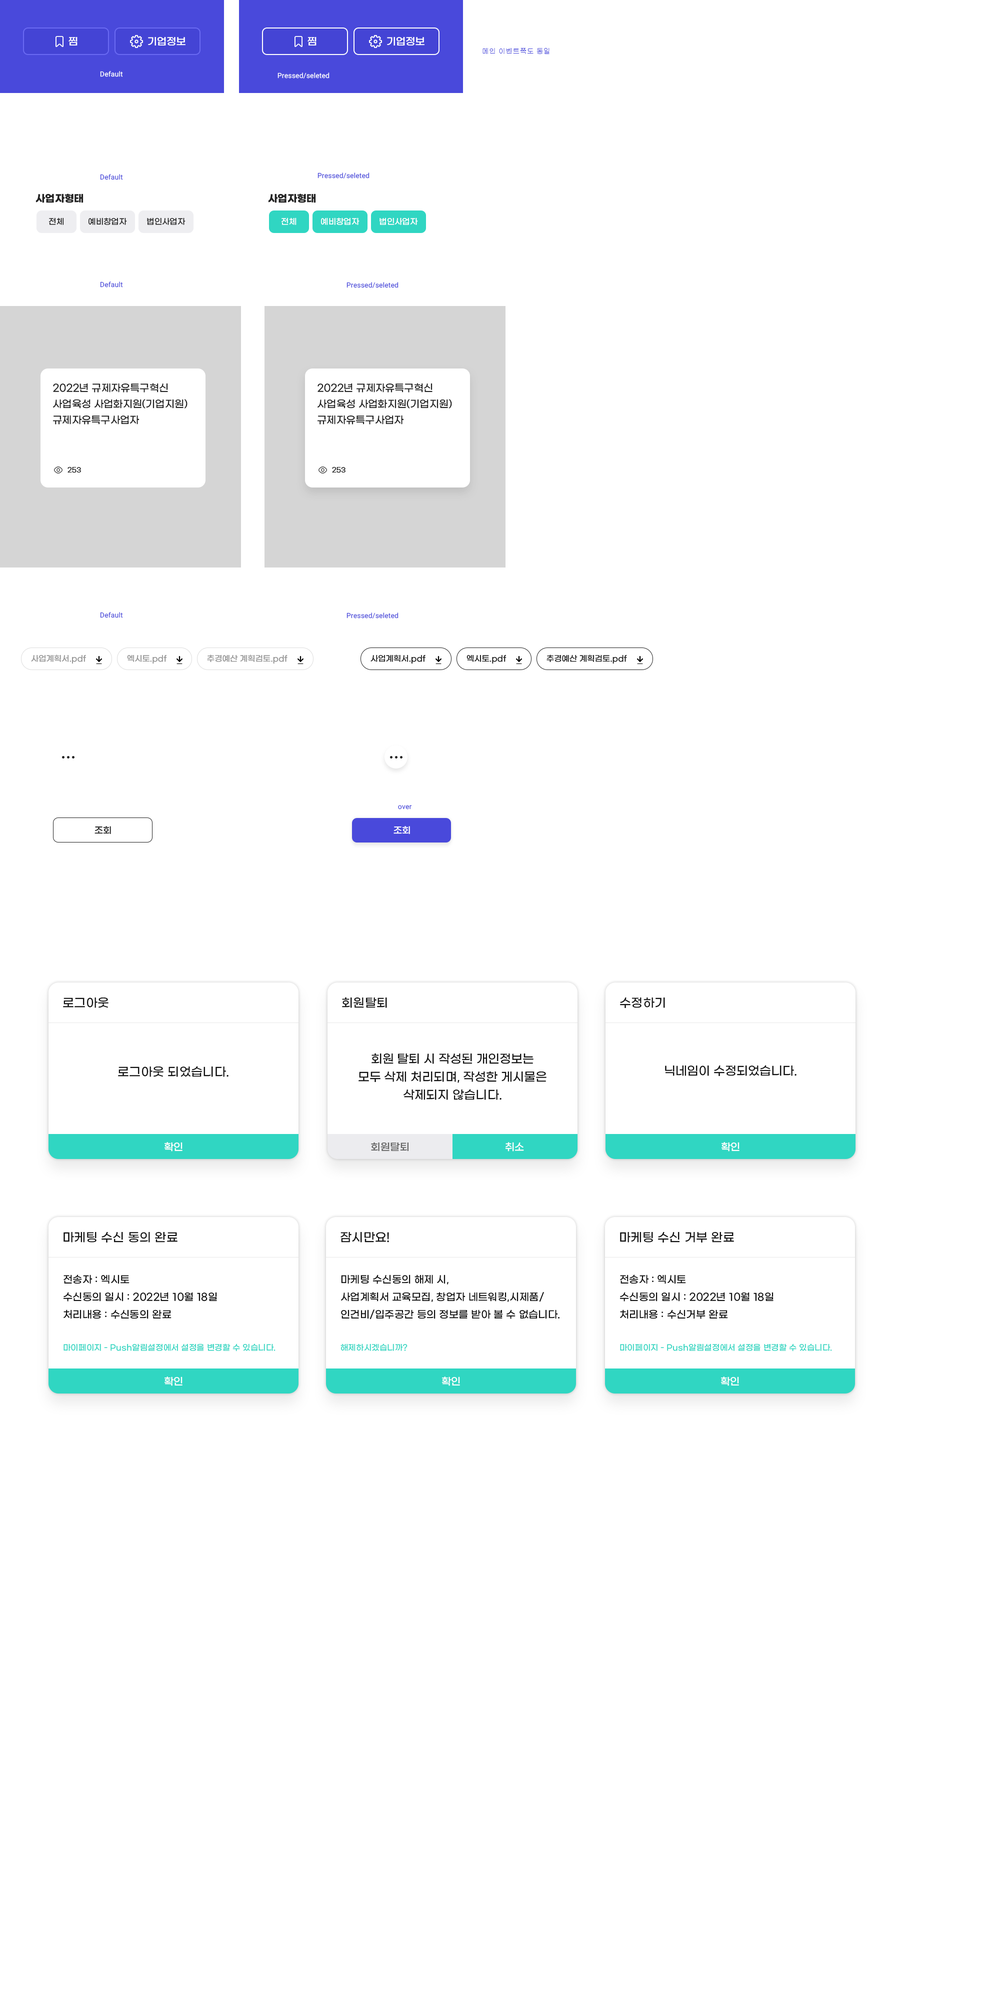
<style>
.page{position:relative;width:1000px;height:2000px;background:#ffffff}
.page>*{position:absolute;margin:0}
.t1{font:10px "GmarketSansMedium";color:#ffffff}
.t2{font:7px "Gulim";letter-spacing:0.01em;color:#4949db}
.t3{font:7px "Heebo-Regular";letter-spacing:0.01em;color:#ffffff}
.t4{font:7px "Heebo-Regular";letter-spacing:0.01em;color:#4949db}
.t5{font:10px "GmarketSansBold";color:#222222}
.t6{font:8px "GmarketSansMedium";color:#222222}
.t7{font:8px "GmarketSansMedium";color:#ffffff}
.t8{font:10px/16px "GmarketSansMedium";color:#222222}
.t9{font:7px "GmarketSansMedium";color:#222222}
.t10{font:8px "GmarketSansMedium";color:#999999}
.t11{font:9px "GmarketSansMedium";color:#222222}
.t12{font:9px "GmarketSansMedium";color:#ffffff}
.t13{font:12px "GmarketSansMedium";letter-spacing:0.01em;color:#101010}
.t14{font:12px/18px "GmarketSansMedium";color:#101010}
.t15{font:12px "GmarketSansMedium";color:#101010}
.t16{font:10px "GmarketSansMedium";letter-spacing:0.01em;color:#ffffff}
.t17{font:10px "GmarketSansMedium";letter-spacing:0.01em;color:#666666}
.t18{font:10px "GmarketSansMedium";letter-spacing:0.01em;color:#101010}
.t19{font:8px "GmarketSansMedium";letter-spacing:0.01em;color:#30d6c2}
</style>
<div class="page">
<p class="t1" style="left:68px;top:37px;width:10px;height:9px">찜</p>
<p class="t1" style="left:148px;top:37px;width:38px;height:9px">기업정보</p>
<p class="t1" style="left:308px;top:37px;width:8px;height:9px">찜</p>
<p class="t1" style="left:387px;top:37px;width:37px;height:9px">기업정보</p>
<p class="t2" style="left:482px;top:48px;width:68px;height:6px">메인 이벤트쪽도 동일</p>
<p class="t3" style="left:100px;top:71px;width:23px;height:6px">Default</p>
<p class="t3" style="left:278px;top:72px;width:52px;height:6px">Pressed/seleted</p>
<p class="t4" style="left:100px;top:174px;width:23px;height:6px">Default</p>
<p class="t4" style="left:318px;top:172px;width:52px;height:6px">Pressed/seleted</p>
<p class="t5" style="left:36px;top:194px;width:48px;height:9px">사업자형태</p>
<p class="t5" style="left:268px;top:194px;width:48px;height:9px">사업자형태</p>
<p class="t6" style="left:49px;top:218px;width:15px;height:7px">전체</p>
<p class="t6" style="left:88px;top:218px;width:39px;height:7px">예비창업자</p>
<p class="t6" style="left:147px;top:218px;width:39px;height:7px">법인사업자</p>
<p class="t7" style="left:282px;top:218px;width:14px;height:7px">전체</p>
<p class="t7" style="left:320px;top:218px;width:40px;height:7px">예비창업자</p>
<p class="t7" style="left:380px;top:218px;width:38px;height:7px">법인사업자</p>
<p class="t4" style="left:100px;top:282px;width:23px;height:6px">Default</p>
<p class="t4" style="left:346px;top:282px;width:52px;height:6px">Pressed/seleted</p>
<p class="t8" style="left:53px;top:383px;width:135px;height:41px">2022년 규제자유특구혁신 <br>사업육성 사업화지원(기업지원)<br>규제자유특구사업자</p>
<p class="t8" style="left:318px;top:383px;width:134px;height:41px">2022년 규제자유특구혁신 <br>사업육성 사업화지원(기업지원)<br>규제자유특구사업자</p>
<p class="t9" style="left:68px;top:466px;width:13px;height:7px">253</p>
<p class="t9" style="left:332px;top:466px;width:14px;height:7px">253</p>
<p class="t4" style="left:100px;top:612px;width:23px;height:6px">Default</p>
<p class="t4" style="left:346px;top:612px;width:52px;height:6px">Pressed/seleted</p>
<p class="t10" style="left:31px;top:654px;width:55px;height:10px">사업계획서.pdf</p>
<p class="t10" style="left:127px;top:655px;width:40px;height:9px">엑시토.pdf</p>
<p class="t10" style="left:207px;top:654px;width:81px;height:10px">추경예산 계획검토.pdf</p>
<p class="t6" style="left:370px;top:654px;width:56px;height:10px">사업계획서.pdf</p>
<p class="t6" style="left:466px;top:655px;width:40px;height:9px">엑시토.pdf</p>
<p class="t6" style="left:546px;top:654px;width:81px;height:10px">추경예산 계획검토.pdf</p>
<p class="t4" style="left:398px;top:805px;width:14px;height:5px">over</p>
<p class="t11" style="left:94px;top:826px;width:17px;height:8px">조회</p>
<p class="t12" style="left:394px;top:826px;width:16px;height:8px">조회</p>
<p class="t13" style="left:63px;top:998px;width:45px;height:10px">로그아웃</p>
<p class="t13" style="left:342px;top:997px;width:45px;height:11px">회원탈퇴</p>
<p class="t13" style="left:620px;top:997px;width:45px;height:11px">수정하기</p>
<p class="t14" style="left:358px;top:1053px;width:188px;height:47px;text-align:center">회원 탈퇴 시 작성된 개인정보는<br>모두 삭제 처리되며, 작성한 게시물은<br>삭제되지 않습니다.</p>
<p class="t13" style="left:118px;top:1066px;width:110px;height:11px">로그아웃 되었습니다.</p>
<p class="t15" style="left:665px;top:1065px;width:131px;height:11px">닉네임이 수정되었습니다.</p>
<p class="t16" style="left:164px;top:1142px;width:18px;height:10px">확인</p>
<p class="t17" style="left:371px;top:1142px;width:37px;height:9px">회원탈퇴</p>
<p class="t16" style="left:506px;top:1142px;width:18px;height:10px">취소</p>
<p class="t16" style="left:722px;top:1142px;width:18px;height:10px">확인</p>
<p class="t13" style="left:64px;top:1232px;width:114px;height:10px">마케팅 수신 동의 완료</p>
<p class="t13" style="left:340px;top:1232px;width:49px;height:10px">잠시만요!</p>
<p class="t13" style="left:620px;top:1232px;width:114px;height:10px">마케팅 수신 거부 완료</p>
<p class="t18" style="left:64px;top:1274px;width:153px;height:45px">전송자 : 엑시토<br>수신동의 일시 : 2022년 10월 18일<br>처리내용 : 수신동의 완료</p>
<p class="t18" style="left:341px;top:1274px;width:219px;height:46px">마케팅 수신동의 해제 시,<br>사업계획서 교육모집, 창업자 네트워킹,시제품/<br>인건비/입주공간 등의 정보를 받아 볼 수 없습니다.</p>
<p class="t18" style="left:620px;top:1274px;width:154px;height:45px">전송자 : 엑시토<br>수신동의 일시 : 2022년 10월 18일<br>처리내용 : 수신거부 완료</p>
<p class="t19" style="left:64px;top:1344px;width:212px;height:8px">마이페이지 - Push알림설정에서 설정을 변경할 수 있습니다.</p>
<p class="t19" style="left:340px;top:1344px;width:68px;height:7px">해제하시겠습니까?</p>
<p class="t19" style="left:620px;top:1344px;width:212px;height:8px">마이페이지 - Push알림설정에서 설정을 변경할 수 있습니다.</p>
<p class="t16" style="left:164px;top:1376px;width:18px;height:10px">확인</p>
<p class="t16" style="left:442px;top:1376px;width:18px;height:10px">확인</p>
<p class="t16" style="left:721px;top:1376px;width:18px;height:10px">확인</p>
</div>
